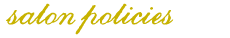
<style>
.page{position:relative;width:230px;height:38px;background:#ffffff}
.page>*{position:absolute;margin:0}
.t1{font:30px "ArchiveRoundhandScript";color:#c7b200}
</style>
<div class="page">
<p class="t1" style="left:6px;top:3px;width:168px;height:32px">salon policies</p>
</div>
